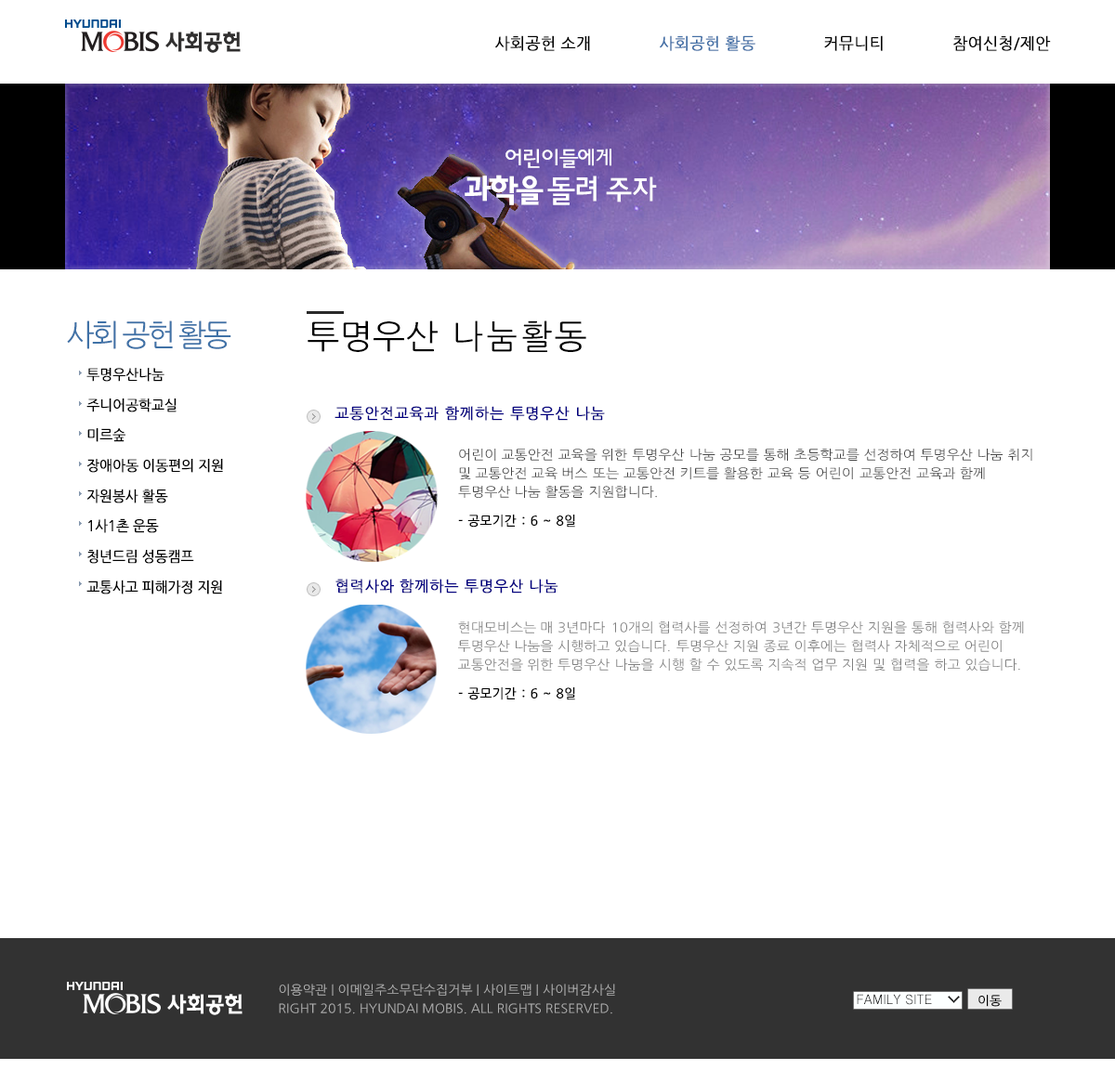
<style>
.page{position:relative;width:1115px;height:1070px;background:#ffffff}
.page>*{position:absolute;margin:0}
.t1{font:15.8px "NanumGothic";color:#000000;font-weight:bold}
.t2{font:15.8px "NanumGothic";color:#426fa6;font-weight:bold}
.t3{font:21.4px "HaanYGodic23";letter-spacing:-0.075em;color:#ffffff;scale:1.04 1}
.t4{font:21.7px "HaanYGodic23";letter-spacing:-0.075em;color:#ffffff}
.t5{font:32px "HaanYGodic25";letter-spacing:-0.075em;color:#ffffff;scale:0.95 1}
.t6{font:30.1px "HaanYGodic23";letter-spacing:-0.075em;color:#ffffff;scale:0.85 1}
.t7{font:31.2px "HaanYGodic25";letter-spacing:-0.075em;color:#ffffff;scale:1.06 1}
.t8{font:30.3px "HaanYGodic25";letter-spacing:-0.075em;color:#ffffff}
.t9{font:31.7px "HaanYGodic23";letter-spacing:-0.075em;color:#ffffff;scale:1.03 1}
.t10{font:32.8px "HaanYGodic23";letter-spacing:-0.075em;color:#ffffff;scale:0.9 1}
.t11{font:31.7px "HaanYGodic23";letter-spacing:-0.075em;color:#ffffff}
.t12{font:31.7px "HaanYGodic23";letter-spacing:-0.075em;color:#ffffff;scale:0.9 1}
.t13{font:30.1px "NanumGothic";letter-spacing:-0.1em;color:#4072a7}
.t14{font:33.4px "NanumGothic";color:#000000;scale:1.05 1}
.t15{font:33.4px "NanumGothic";color:#000000}
.t16{font:33.4px "NanumGothic";color:#000000;scale:1.06 1}
.t17{font:14.2px/15.1px "NanumGothic";letter-spacing:-0.025em;color:#000000;font-weight:bold}
.t18{font:14.9px "NanumGothic";letter-spacing:0.025em;color:#02007f;font-weight:bold}
.t19{font:13px/18.6px "NanumGothic";color:#454545;scale:1.07 1}
.t20{font:14.5px/15.2px "NanumGothic";letter-spacing:-0.025em;color:#000000;font-weight:bold;scale:0.94 1}
.t21{font:13px "NanumGothic";color:#000000;font-weight:bold;scale:0.97 1}
.t22{font:13px/18.6px "NanumGothic";color:#808080;scale:1.07 1}
.t23{font:12.5px "NanumGothic";color:#aeaeae;scale:1.04 1}
.t24{font:13.1px "Dotum";color:#000000}
.t25{font:12.1px "NanumGothic";color:#000000;scale:1.06 1}
</style>
<div class="page">
<p class="t1" style="left:495px;top:35px;width:555px;height:16px">사회공헌 소개<span class="t2">              사회공헌 활동              </span>커뮤니티              참여신청/제안</p>
<p class="t3" style="left:505px;top:149px;width:106px;height:19px">어린이들<span class="t4">에게</span></p>
<p class="t5" style="left:464px;top:175px;width:79px;height:30px"><span class="t6"><br></span>과<span class="t7">학</span><span class="t8">을</span></p>
<p class="t9" style="left:547px;top:176px;width:110px;height:29px">돌<span class="t10">려 </span><span class="t11">주</span><span class="t12">자</span></p>
<p class="t13" style="left:67px;top:320px;width:164px;height:29px">사회 공헌 활동</p>
<p class="t14" style="left:307px;top:320px;width:279px;height:32px">투명우 산 <span class="t15">나 눔 활 </span><span class="t16">동</span></p>
<p class="t17" style="left:86px;top:368px;width:137px;height:105px">투명우산나눔<br><br>주니어공학교실<br><br>미르숲<br><br>장애아동 이동편의 지원</p>
<p class="t18" style="left:334px;top:406px;width:271px;height:15px">교통안전교육과 함께하는 투명우산 나눔</p>
<p class="t19" style="left:458px;top:449px;width:574px;height:49px">어린이 교통안전 교육을 위한 투명우산 나눔 공모를 통해 초등학교를 선정하여 투명우산 나눔 취지<br>및 교통안전 교육 버스 또는 교통안전 키트를 활용한 교육 등 어린이 교통안전 교육과 함께<br>투명우산 나눔 활동을 지원합니다.</p>
<p class="t20" style="left:86px;top:489px;width:136px;height:105px">자원봉사 활동<br><br>1사1촌 운동<br><br>청년드림 성동캠프<br><br>교통사고 피해가정 지원</p>
<p class="t21" style="left:458px;top:515px;width:117px;height:13px">- 공모기간 : 6 ~ 8일</p>
<p class="t18" style="left:335px;top:579px;width:223px;height:14px">협력사와 함께하는 투명우산 나눔</p>
<p class="t22" style="left:458px;top:621px;width:565px;height:50px">현대모비스는 매 3년마다  10개의 협력사를 선정하여 3년간 투명우산 지원을 통해 협력사와 함께<br>투명우산 나눔을 시행하고 있습니다. 투명우산 지원 종료 이후에는 협력사 자체적으로 어린이<br>교통안전을 위한 투명우산 나눔을 시행 할 수 있도록 지속적 업무 지원 및 협력을 하고 있습니다.</p>
<p class="t21" style="left:458px;top:687px;width:117px;height:13px">- 공모기간 : 6 ~ 8일</p>
<p class="t23" style="left:279px;top:984px;width:336px;height:12px">이용약관 | 이메일주소무단수집거부 | 사이트맵 | 사이버감사실</p>
<p class="t24" style="left:856px;top:994px;width:76px;height:11px">FAMILY SITE</p>
<p class="t25" style="left:978px;top:995px;width:23px;height:12px">이동</p>
<p class="t23" style="left:279px;top:1003px;width:333px;height:11px">RIGHT 2015. HYUNDAI MOBIS. ALL RIGHTS RESERVED.</p>
</div>
